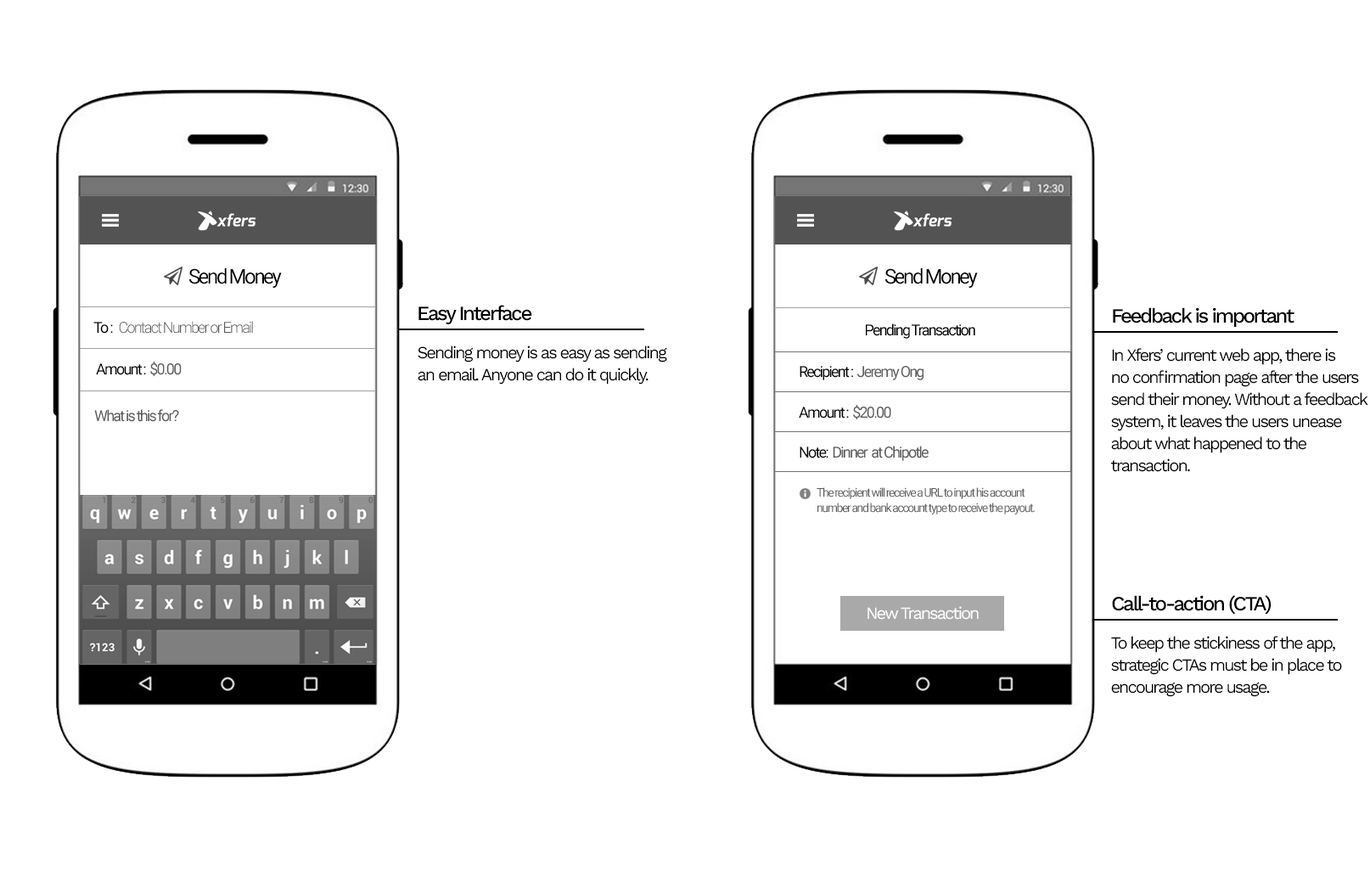
<style>
.page{position:relative;width:1370px;height:871px;background:#ffffff}
.page>*{position:absolute;margin:0}
.t1{font:20.4px "Roboto-Regular";letter-spacing:-0.1em;color:#000000}
.t2{font:20.4px "WorkSans-Medium";letter-spacing:-0.1em;color:#000000}
.t3{font:15.3px "Roboto-Light";letter-spacing:-0.1em;color:#5d5d5d}
.t4{font:15.3px "Roboto-Regular";letter-spacing:-0.1em;color:#000000}
.t5{font:17px/22.1px "WorkSans-Regular";letter-spacing:-0.1em;color:#000000}
.t6{font:15.3px "Roboto-Regular";letter-spacing:-0.1em;color:#5d5d5d}
.t7{font:11.9px/15.3px "Roboto-Regular";letter-spacing:-0.1em;color:#5d5d5d}
.t8{font:17px "WorkSans-Regular";letter-spacing:-0.1em;color:#ffffff}
</style>
<div class="page">
<p class="t1" style="left:189px;top:268px;width:93px;height:20px">Send Money</p>
<p class="t1" style="left:885px;top:268px;width:93px;height:20px">Send Money</p>
<p class="t2" style="left:418px;top:305px;width:114px;height:19px">Easy Interface</p>
<p class="t2" style="left:1112px;top:307px;width:182px;height:20px">Feedback is important</p>
<p class="t3" style="left:93px;top:321px;width:160px;height:12px"><span class="t4">To :   </span>Contact Number or Email</p>
<p class="t4" style="left:866px;top:323px;width:109px;height:16px">Pending Transaction</p>
<p class="t5" style="left:418px;top:345px;width:249px;height:39px">Sending money is as easy as sending<br>an email. Anyone can do it quickly.</p>
<p class="t5" style="left:1111px;top:348px;width:257px;height:124px">In Xfers’ current web app, there is <br>no confirmation page after the users <br>send their money. Without a feedback system, it leaves the users unease about what happened to the <br>transaction.</p>
<p class="t4" style="left:96px;top:361px;width:86px;height:15px">Amount :  <span class="t6">$0.00</span></p>
<p class="t4" style="left:799px;top:366px;width:124px;height:14px">Recipient :  <span class="t6">Jeremy Ong</span></p>
<p class="t6" style="left:94px;top:409px;width:85px;height:13px">What is this for?</p>
<p class="t4" style="left:799px;top:405px;width:92px;height:14px">Amount :  <span class="t6">$20.00</span></p>
<p class="t6" style="left:799px;top:446px;width:129px;height:15px"><span class="t4">Note:  </span>Dinner  at Chipotle</p>
<p class="t7" style="left:816px;top:487px;width:218px;height:27px">The recipient will receive a URL to input his account number and bank account type to receive the payout.</p>
<p class="t8" style="left:867px;top:606px;width:111px;height:13px">New Transaction</p>
<p class="t2" style="left:1112px;top:595px;width:159px;height:19px">Call-to-action (CTA)</p>
<p class="t5" style="left:1111px;top:636px;width:231px;height:61px">To keep the stickiness of the app, <br>strategic CTAs must be in place to encourage more usage.</p>
</div>
